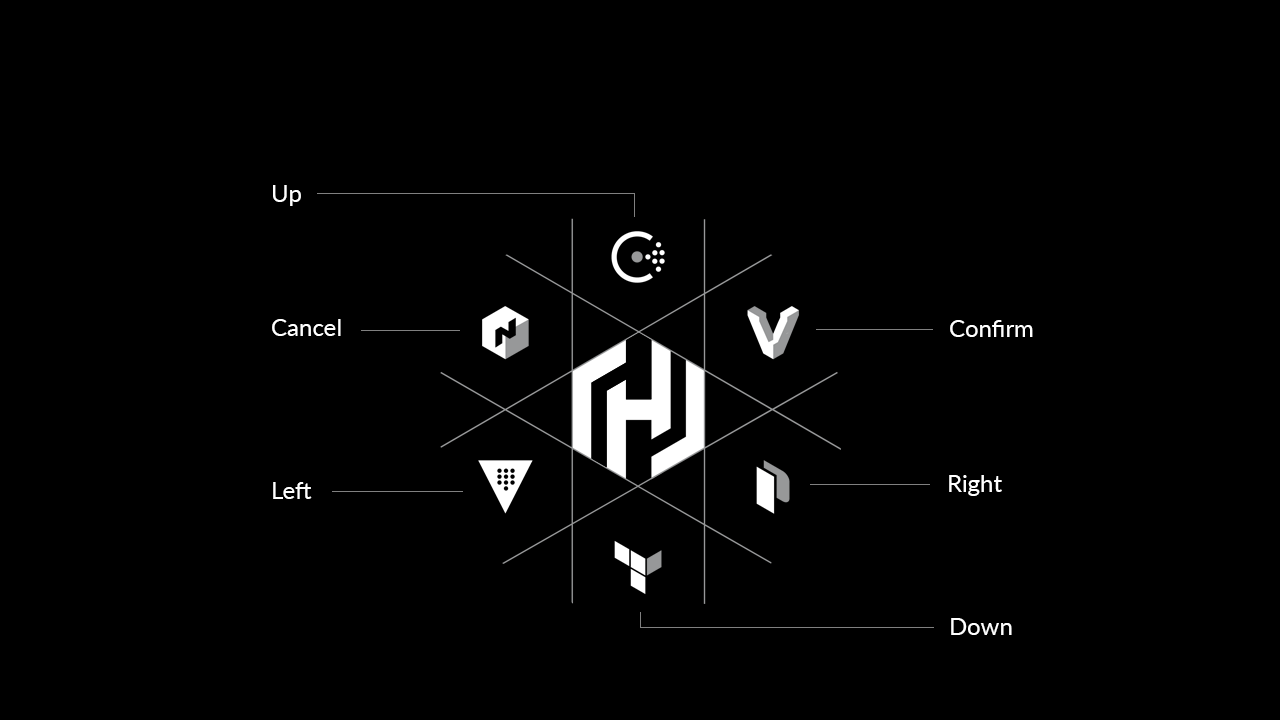
<style>
.page{position:relative;width:1280px;height:720px;background:#000000}
.page>*{position:absolute;margin:0}
.t1{font:24px "Lato-Regular";color:#ffffff}
</style>
<div class="page">
<p class="t1" style="left:273px;top:185px;width:28px;height:21px">Up</p>
<p class="t1" style="left:272px;top:319px;width:69px;height:17px">Cancel</p>
<p class="t1" style="left:950px;top:320px;width:83px;height:17px">Confirm</p>
<p class="t1" style="left:273px;top:482px;width:39px;height:17px">Left</p>
<p class="t1" style="left:949px;top:475px;width:53px;height:21px">Right</p>
<p class="t1" style="left:951px;top:618px;width:61px;height:17px">Down</p>
</div>
